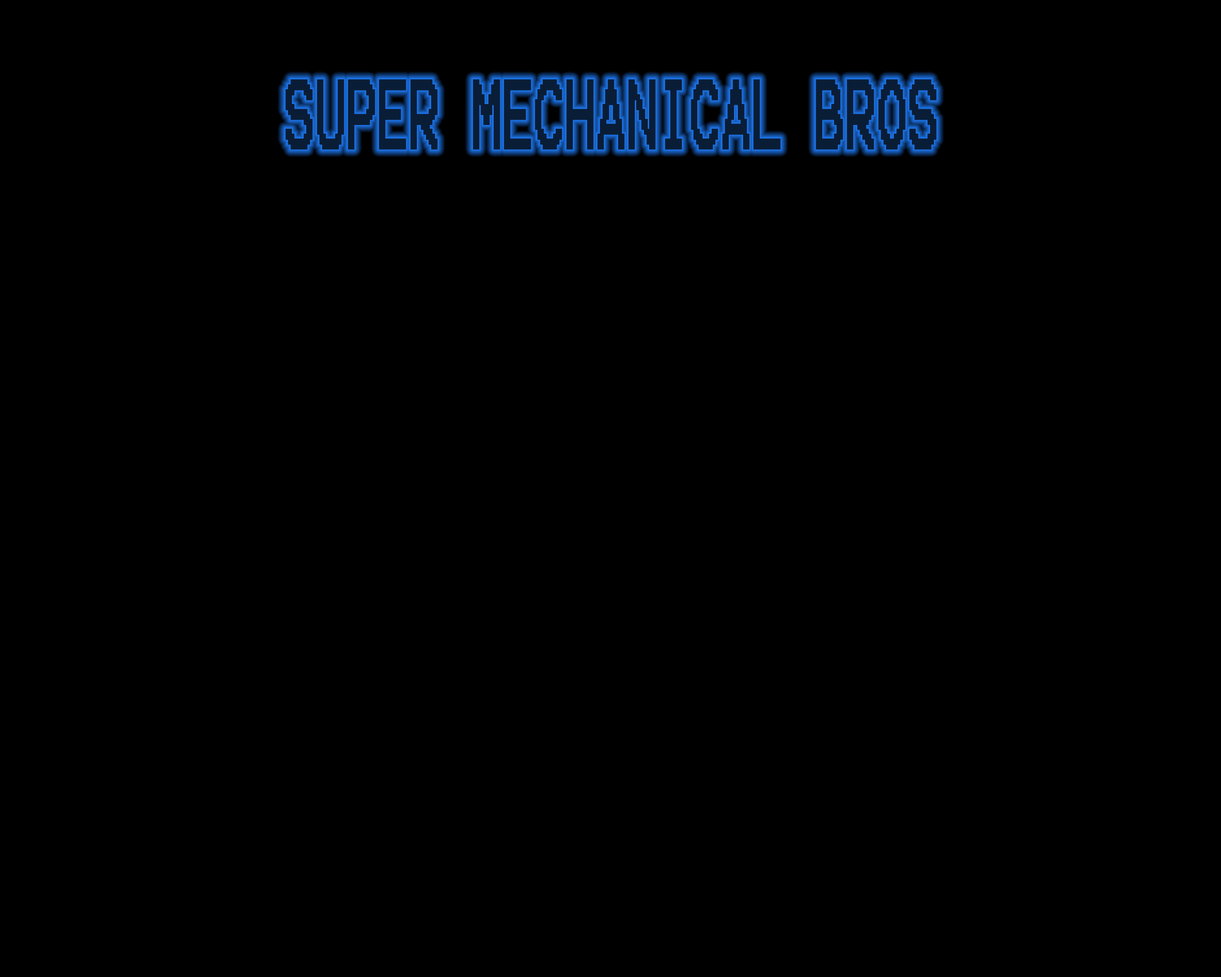
<style>
.page{position:relative;width:1221px;height:977px;background:#000000}
.page>*{position:absolute;margin:0}
.t1{font:78.8px "Terminal";color:#0a1d36;font-weight:bold;scale:0.53 1}
</style>
<div class="page">
<p class="t1" style="left:285px;top:79px;width:652px;height:71px">SUPER MECHANICAL BROS</p>
</div>
